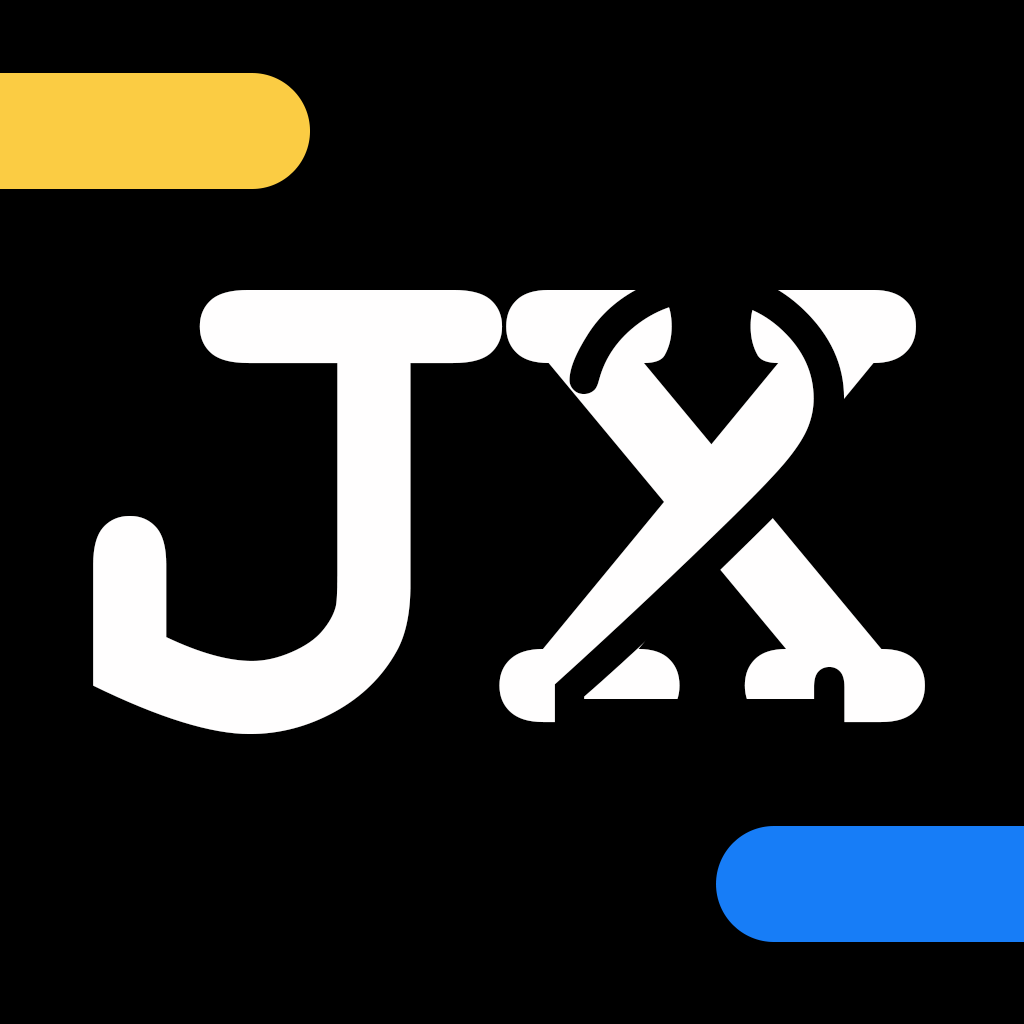
<style>
.page{position:relative;width:1024px;height:1024px;background:#000000}
.page>*{position:absolute;margin:0}
.t1{font:730px "CourierNewPSMT";color:#000000}
.t2{font:730px "CourierNewPS-BoldMT";color:#fffefe}
</style>
<div class="page">
<p class="t1" style="left:554px;top:271px;width:291px;height:458px">2</p>
<p class="t2" style="left:93px;top:290px;width:832px;height:444px">JX</p>
</div>
